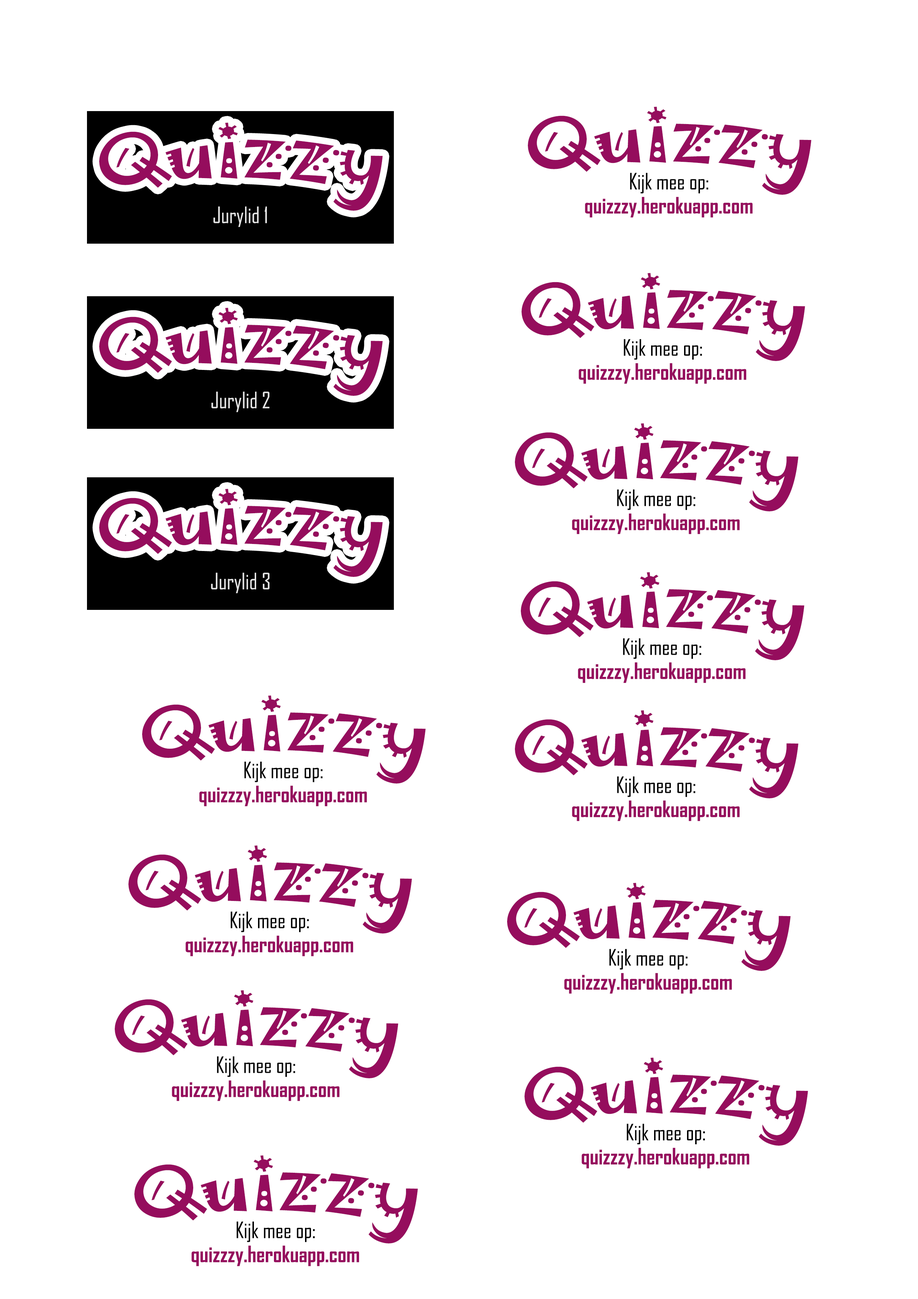
<style>
.page{position:relative;width:918px;height:1299px;background:#ffffff}
.page>*{position:absolute;margin:0}
.t1{font:74px "Jokerman-Regular";color:#950d5d}
.t2{font:21.6px "AgencyFB-Reg";color:#000000}
.t3{font:21.6px "AgencyFB-Bold";color:#950d5d}
.t4{font:21.6px "AgencyFB-Reg";color:#e4e4e4}
</style>
<div class="page">
<p class="t1" style="left:528px;top:107px;width:284px;height:88px">Quizzy</p>
<p class="t1" style="left:99px;top:123px;width:284px;height:88px">Quizzy</p>
<p class="t2" style="left:630px;top:173px;width:79px;height:21px">Kijk mee op:</p>
<p class="t3" style="left:585px;top:197px;width:168px;height:21px">quizzzy.herokuapp.com</p>
<p class="t4" style="left:213px;top:206px;width:54px;height:21px">Jurylid 1</p>
<p class="t1" style="left:522px;top:273px;width:283px;height:88px">Quizzy</p>
<p class="t1" style="left:99px;top:308px;width:284px;height:88px">Quizzy</p>
<p class="t2" style="left:624px;top:339px;width:78px;height:21px">Kijk mee op:</p>
<p class="t3" style="left:579px;top:363px;width:167px;height:21px">quizzzy.herokuapp.com</p>
<p class="t4" style="left:211px;top:391px;width:59px;height:21px">Jurylid 2</p>
<p class="t1" style="left:515px;top:423px;width:284px;height:88px">Quizzy</p>
<p class="t1" style="left:99px;top:489px;width:284px;height:88px">Quizzy</p>
<p class="t1" style="left:99px;top:489px;width:284px;height:88px">Quizzy</p>
<p class="t2" style="left:617px;top:489px;width:79px;height:21px">Kijk mee op:</p>
<p class="t3" style="left:572px;top:513px;width:168px;height:21px">quizzzy.herokuapp.com</p>
<p class="t4" style="left:211px;top:572px;width:59px;height:21px">Jurylid 3</p>
<p class="t4" style="left:211px;top:572px;width:59px;height:21px">Jurylid 3</p>
<p class="t1" style="left:521px;top:572px;width:283px;height:88px">Quizzy</p>
<p class="t2" style="left:623px;top:638px;width:79px;height:21px">Kijk mee op:</p>
<p class="t3" style="left:578px;top:662px;width:168px;height:21px">quizzzy.herokuapp.com</p>
<p class="t1" style="left:142px;top:695px;width:284px;height:88px">Quizzy</p>
<p class="t1" style="left:515px;top:710px;width:284px;height:88px">Quizzy</p>
<p class="t2" style="left:244px;top:761px;width:79px;height:21px">Kijk mee op:</p>
<p class="t3" style="left:199px;top:785px;width:168px;height:21px">quizzzy.herokuapp.com</p>
<p class="t2" style="left:617px;top:776px;width:79px;height:21px">Kijk mee op:</p>
<p class="t3" style="left:572px;top:800px;width:168px;height:21px">quizzzy.herokuapp.com</p>
<p class="t1" style="left:128px;top:845px;width:284px;height:88px">Quizzy</p>
<p class="t1" style="left:507px;top:883px;width:284px;height:88px">Quizzy</p>
<p class="t2" style="left:231px;top:911px;width:78px;height:21px">Kijk mee op:</p>
<p class="t3" style="left:185px;top:935px;width:168px;height:21px">quizzzy.herokuapp.com</p>
<p class="t2" style="left:609px;top:949px;width:79px;height:21px">Kijk mee op:</p>
<p class="t3" style="left:564px;top:973px;width:168px;height:21px">quizzzy.herokuapp.com</p>
<p class="t1" style="left:115px;top:990px;width:283px;height:88px">Quizzy</p>
<p class="t2" style="left:217px;top:1056px;width:78px;height:21px">Kijk mee op:</p>
<p class="t1" style="left:525px;top:1057px;width:283px;height:88px">Quizzy</p>
<p class="t3" style="left:172px;top:1080px;width:167px;height:21px">quizzzy.herokuapp.com</p>
<p class="t2" style="left:627px;top:1123px;width:78px;height:21px">Kijk mee op:</p>
<p class="t1" style="left:134px;top:1155px;width:284px;height:88px">Quizzy</p>
<p class="t3" style="left:582px;top:1147px;width:167px;height:21px">quizzzy.herokuapp.com</p>
<p class="t2" style="left:237px;top:1221px;width:78px;height:21px">Kijk mee op:</p>
<p class="t3" style="left:191px;top:1245px;width:168px;height:21px">quizzzy.herokuapp.com</p>
</div>
